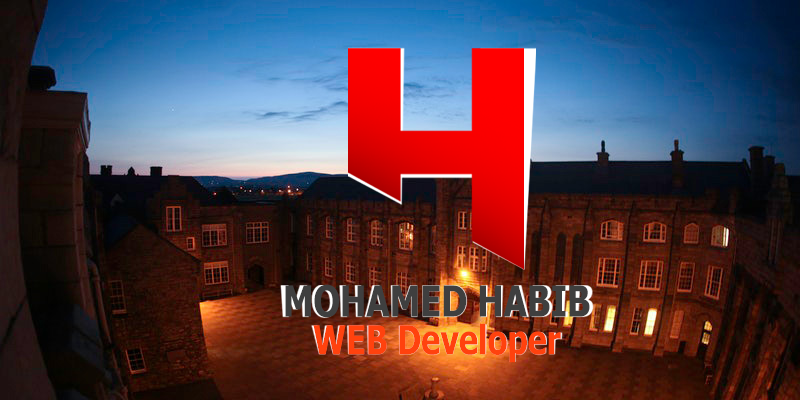
<style>
.page{position:relative;width:800px;height:400px}
.page>*{position:absolute;margin:0}
.t1{font:42.8px "Tahoma-Bold";color:#3f3f3f;scale:0.8 1}
.t2{font:40.1px "Tahoma-Bold";color:#ff420e;scale:0.8 1}
</style>
<div class="page">
<p class="t1" style="left:285px;top:284px;width:305px;height:34px">MOHAMED HABIB</p>
<p class="t2" style="left:313px;top:323px;width:248px;height:40px">WEB Developer</p>
</div>
